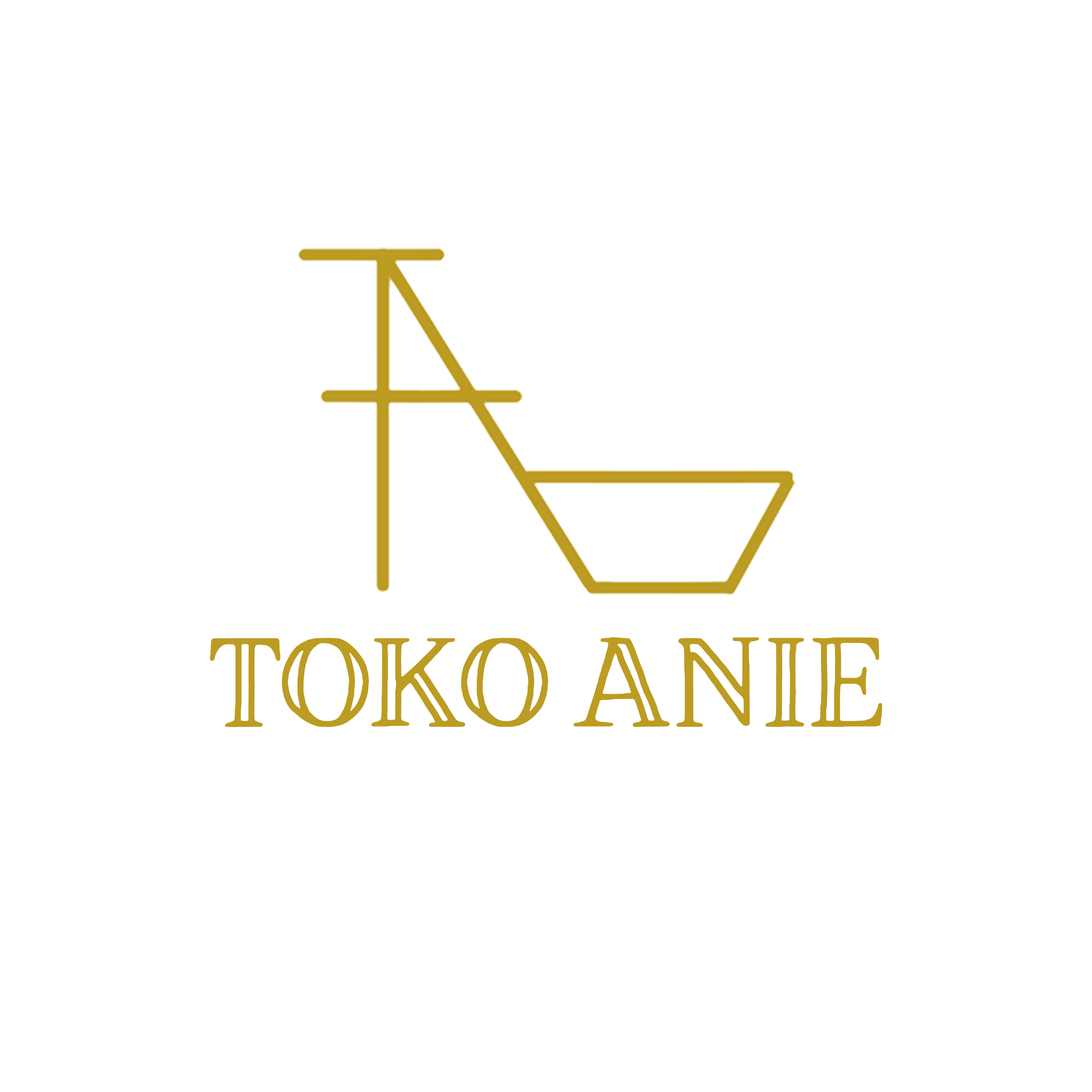
<style>
.page{position:relative;width:1092px;height:1092px;background:#ffffff}
.page>*{position:absolute;margin:0}
.t1{font:127.8px "BrixtonTCOutline-Bold";color:#bc9c22}
</style>
<div class="page">
<p class="t1" style="left:210px;top:637px;width:672px;height:90px">TOKO ANIE</p>
</div>
